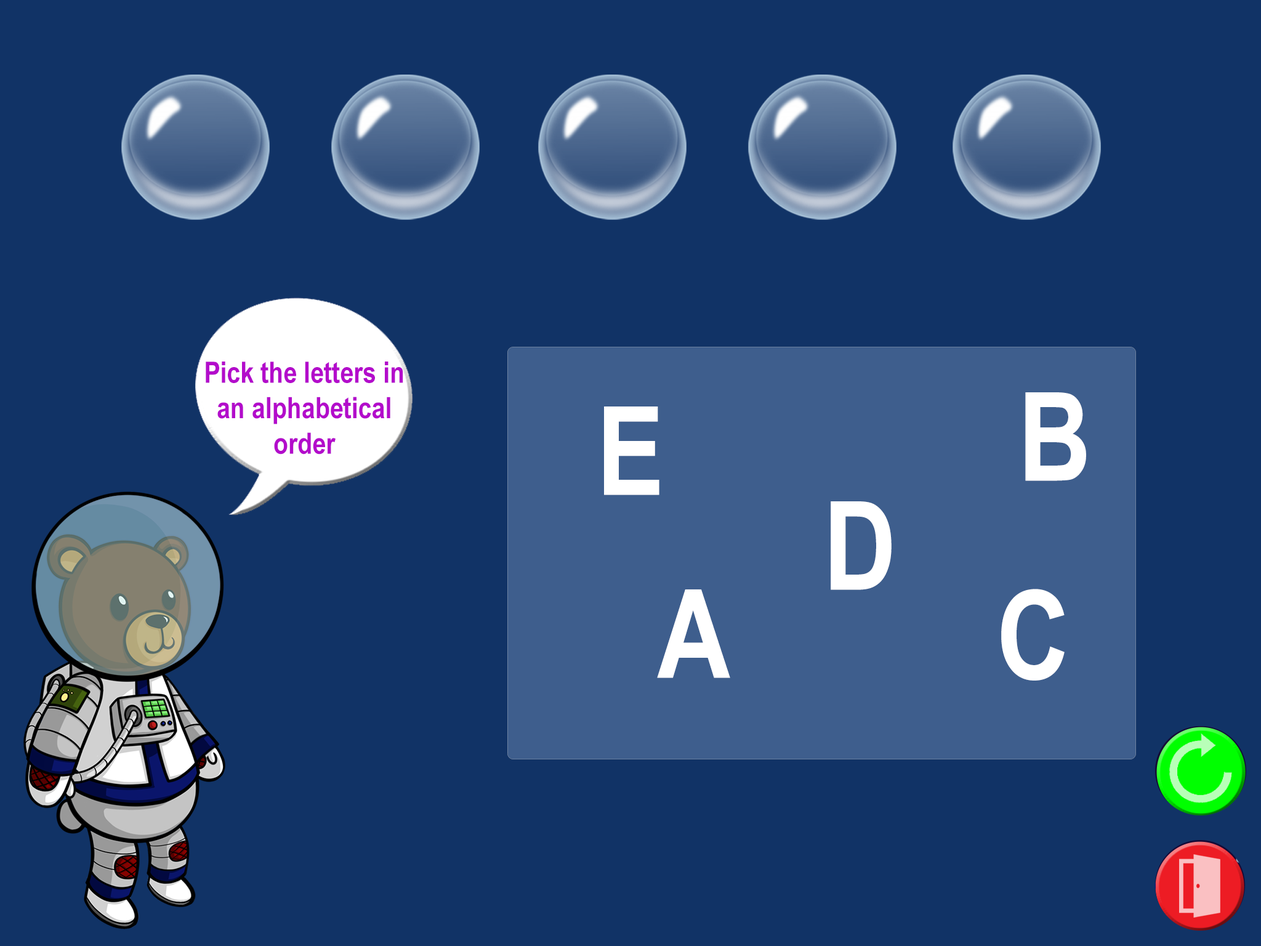
<style>
.page{position:relative;width:1261px;height:946px;background:#113366}
.page>*{position:absolute;margin:0}
.t1{font:29.6px "ArialNarrow-Bold";color:#b30ccb}
.t2{font:123.1px "ArialNarrow-Bold";color:#ffffff}
</style>
<div class="page">
<p class="t1" style="left:206px;top:361px;width:197px;height:93px;text-align:center">Pick the letters in an alphabetical order</p>
<p class="t2" style="left:1025px;top:392px;width:61px;height:89px">B</p>
<p class="t2" style="left:604px;top:406px;width:55px;height:89px">E</p>
<p class="t2" style="left:831px;top:501px;width:61px;height:89px">D</p>
<p class="t2" style="left:657px;top:589px;width:73px;height:89px">A</p>
<p class="t2" style="left:1001px;top:589px;width:64px;height:91px">C</p>
</div>
